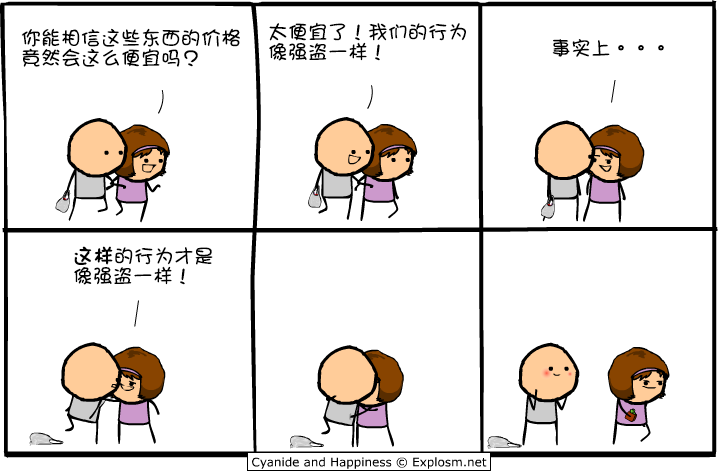
<style>
.page{position:relative;width:720px;height:475px;background:#ffffff}
.page>*{position:absolute;margin:0}
.t1{font:20px/20px "DFGirl";color:#000000}
.t2{font:20px "DFGirl";color:#000000}
.t3{font:20px/20px "DFGirl";color:#000000;font-weight:bold}
</style>
<div class="page">
<p class="t1" style="left:21px;top:28px;width:219px;height:39px">你能相信这些东西的价格<br>竟然会这么便宜吗？</p>
<p class="t1" style="left:269px;top:22px;width:197px;height:39px">太便宜了！我们的行为<br>像强盗一样！</p>
<p class="t2" style="left:552px;top:39px;width:112px;height:18px">事实上。。。</p>
<p class="t1" style="left:74px;top:246px;width:139px;height:39px"><span class="t3">这样</span>的行为才是<br>像强盗一样！</p>
</div>
